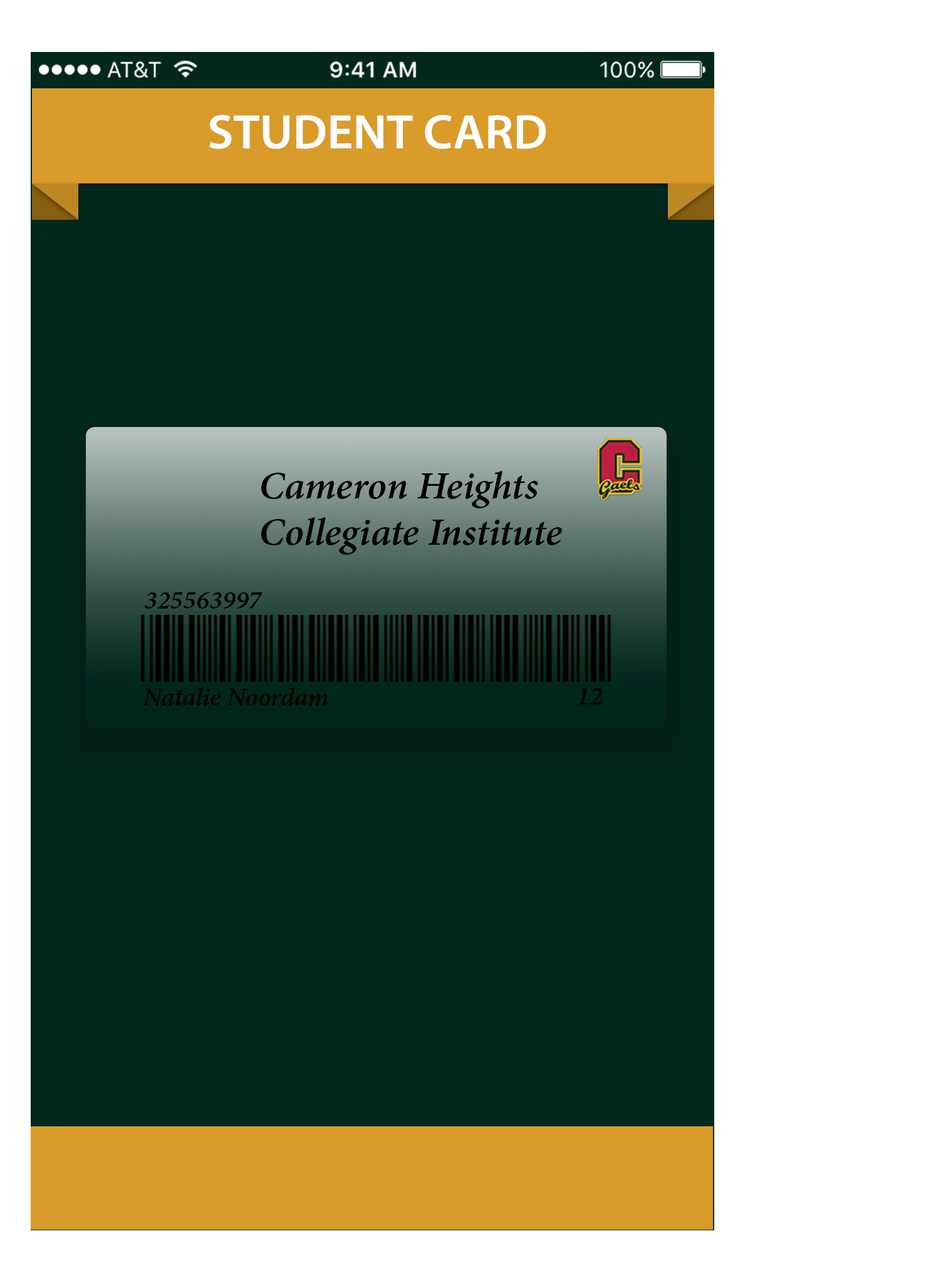
<style>
.page{position:relative;width:931px;height:1281px;background:#02271d}
.page>*{position:absolute;margin:0}
.t1{font:48.6px "MyriadPro-Semibold";color:#ffffff}
.t2{font:38.7px "MinionPro-SemiboldIt";color:#000000;scale:1.03 1}
.t3{font:25.9px "MinionPro-SemiboldIt";color:#000000;scale:1.03 1}
.t4{font:25.8px "MinionPro-SemiboldIt";color:#000000;scale:1.03 1}
</style>
<div class="page">
<p class="t1" style="left:209px;top:115px;width:337px;height:34px">STUDENT CARD</p>
<p class="t2" style="left:261px;top:471px;width:301px;height:84px">Cameron Heights Collegiate Institute</p>
<p class="t3" style="left:145px;top:592px;width:117px;height:17px">325563997</p>
<p class="t4" style="left:143px;top:688px;width:185px;height:18px">Natalie Noordam</p>
<p class="t4" style="left:578px;top:688px;width:24px;height:17px">12</p>
</div>
